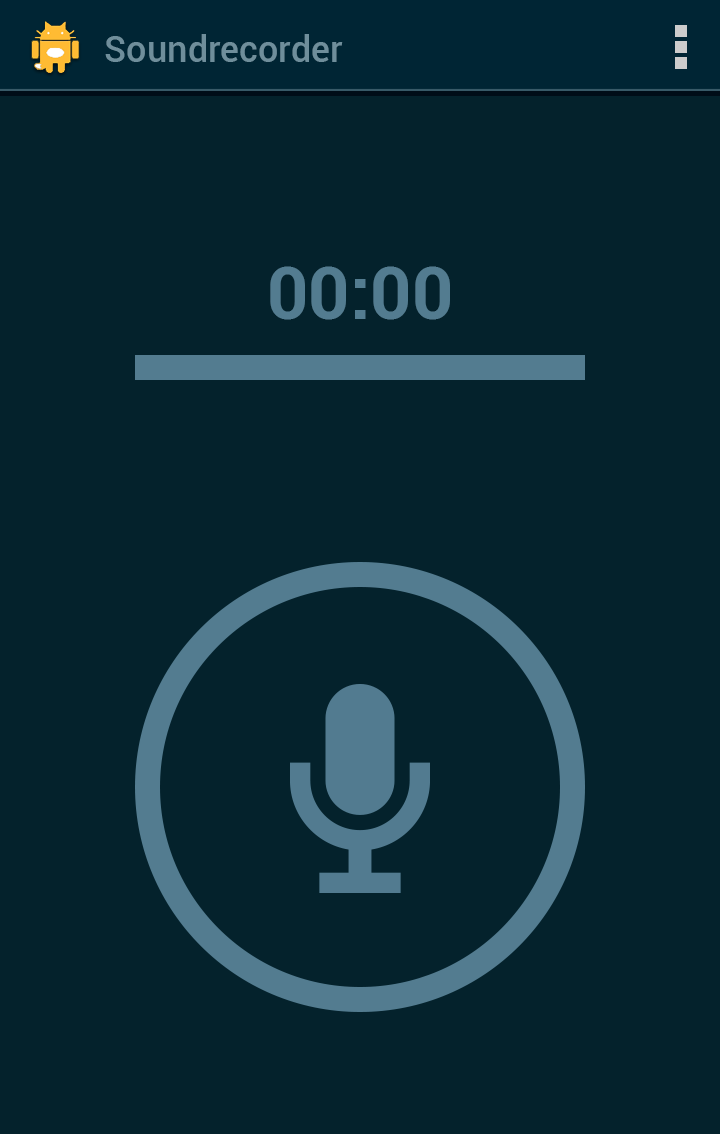
<style>
.page{position:relative;width:720px;height:1134px;background:#04222c}
.page>*{position:absolute;margin:0}
.t1{font:36px "Roboto-Medium";color:#6f8e9b}
.t2{font:72px "Roboto-Bold";color:#537c90}
</style>
<div class="page">
<p class="t1" style="left:105px;top:34px;width:238px;height:28px">Soundrecorder</p>
<p class="t2" style="left:270px;top:266px;width:180px;height:54px">00:00</p>
</div>
